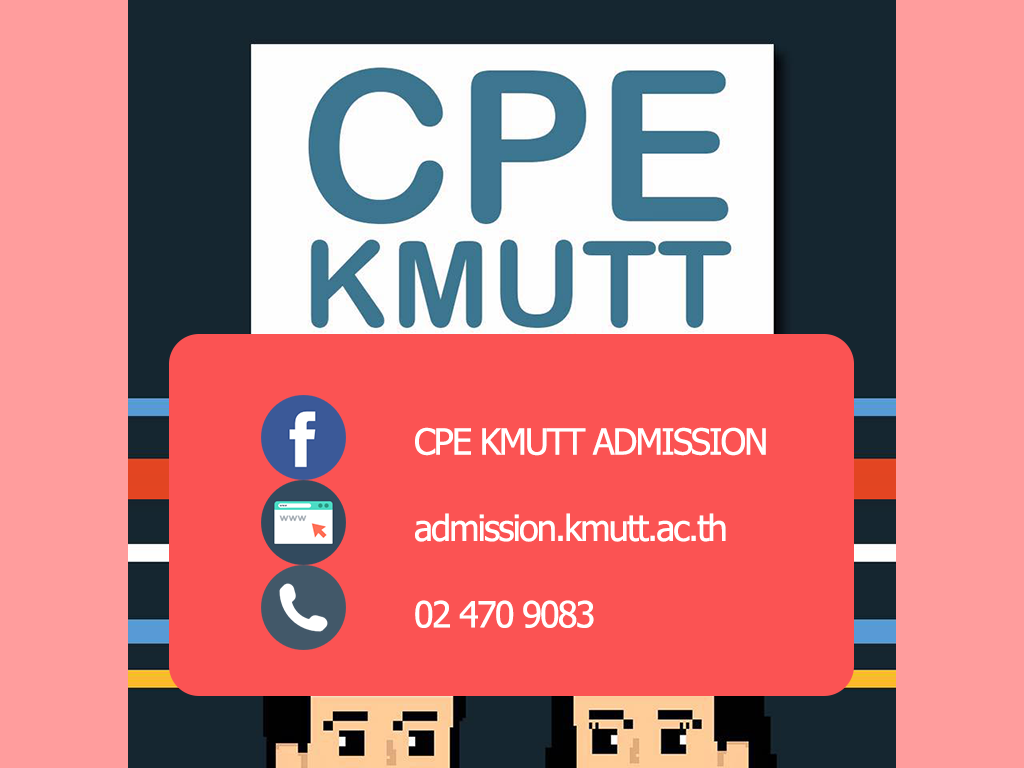
<style>
.page{position:relative;width:1024px;height:768px;background:#fb5353}
.page>*{position:absolute;margin:0}
.t1{font:36px "Tahoma";letter-spacing:-0.05em;color:#ffffff}
</style>
<div class="page">
<p class="t1" style="left:415px;top:427px;width:351px;height:201px;text-align:right">CPE KMUTT ADMISSION<br><br>admission.kmutt.ac.th<br><br>02 470 9083</p>
</div>
